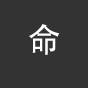
<style>
.page{position:relative;width:88px;height:88px;background:#333333}
.page>*{position:absolute;margin:0}
.t1{font:32px "AdobeHeitiStd-Regular";color:#ffffff}
</style>
<div class="page">
<p class="t1" style="left:29px;top:24px;width:31px;height:31px">命</p>
</div>
